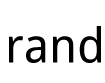
<style>
.page{position:relative;width:105px;height:83px;background:#ffffff}
.page>*{position:absolute;margin:0}
.t1{font:47.9px "DroidSans";color:#000000}
</style>
<div class="page">
<p class="t1" style="left:9px;top:26px;width:92px;height:37px">rand</p>
</div>
